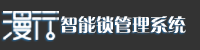
<style>
.page{position:relative;width:200px;height:50px;background:#333333}
.page>*{position:absolute;margin:0}
.t1{font:18px "FZCQJW--GB1-0";color:#ffffff}
</style>
<div class="page">
<p class="t1" style="left:61px;top:16px;width:125px;height:18px">智能锁管理系统</p>
</div>
